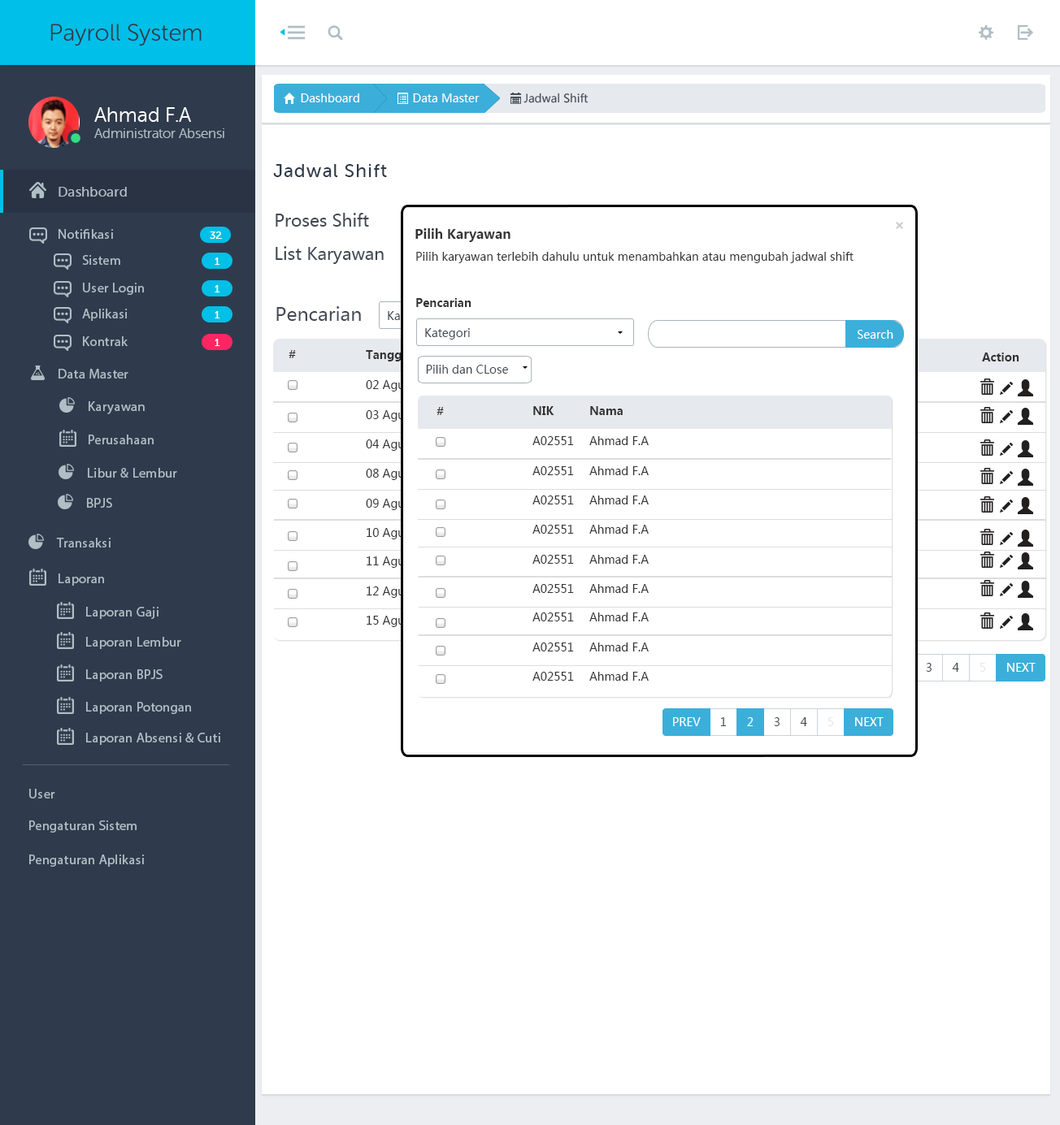
<style>
.page{position:relative;width:1060px;height:1125px;background:#ffffff}
.page>*{position:absolute;margin:0}
.t1{font:23.7px "MuseoSansRounded-300";color:#2f3b4c}
.t2{font:11.4px "MicrosoftYaHei";color:#ffffff}
.t3{font:11.2px "MicrosoftYaHei";color:#434a54}
.t4{font:13.5px "MuseoSansRounded-300";color:#b0bec5}
.t5{font:20.3px "MuseoSansRounded-300";color:#ffffff}
.t6{font:18.6px "MuseoSans-500";letter-spacing:0.04em;color:#2f3b4c}
.t7{font:13.5px "MuseoSans-500";letter-spacing:0.02em;color:#b0bec5}
.t8{font:16.9px "MicrosoftYaHei";color:#434a54}
.t9{font:13.5px "MyriadPro-Regular";letter-spacing:0.02em;color:#b0bec5}
.t10{font:10.2px "MuseoSans-500";letter-spacing:0.02em;color:#ffffff}
.t11{font:13px "MicrosoftYaHei-Bold";color:#333333}
.t12{font:11.4px "MicrosoftYaHei";color:#333333}
.t13{font:11.4px "MicrosoftYaHei-Bold";color:#333333}
.t14{font:18.6px "MicrosoftYaHei";color:#434a54}
.t15{font:11.4px "MicrosoftYaHei"}
.t16{font:11.4px "MicrosoftYaHei";color:#434a54}
.t17{font:11.4px "MicrosoftYaHei";color:#e6e9ed}
</style>
<div class="page">
<p class="t1" style="left:50px;top:24px;width:152px;height:22px">Payroll System</p>
<p class="t2" style="left:301px;top:93px;width:58px;height:9px">Dashboard</p>
<p class="t2" style="left:413px;top:93px;width:66px;height:9px">Data Master</p>
<p class="t3" style="left:523px;top:93px;width:65px;height:10px">Jadwal Shift</p>
<p class="t4" style="left:94px;top:107px;width:130px;height:31px"><span class="t5">Ahmad F.A <br></span>Administrator Absensi</p>
<p class="t6" style="left:273px;top:164px;width:114px;height:13px">Jadwal Shift</p>
<p class="t7" style="left:59px;top:187px;width:68px;height:10px">Dashboard</p>
<p class="t8" style="left:275px;top:213px;width:94px;height:14px">Proses Shift</p>
<p class="t9" style="left:59px;top:229px;width:54px;height:10px">Notifikasi</p>
<p class="t10" style="left:210px;top:232px;width:12px;height:7px">32</p>
<p class="t11" style="left:415px;top:228px;width:95px;height:14px">Pilih Karyawan</p>
<p class="t9" style="left:82px;top:255px;width:38px;height:10px">Sistem</p>
<p class="t10" style="left:215px;top:258px;width:5px;height:7px">1</p>
<p class="t8" style="left:275px;top:246px;width:109px;height:18px">List Karyawan</p>
<p class="t12" style="left:416px;top:252px;width:437px;height:11px">Pilih karyawan terlebih dahulu untuk menambahkan atau mengubah jadwal shift</p>
<p class="t9" style="left:83px;top:283px;width:61px;height:12px">User Login</p>
<p class="t10" style="left:215px;top:285px;width:5px;height:8px">1</p>
<p class="t13" style="left:416px;top:298px;width:55px;height:9px">Pencarian</p>
<p class="t9" style="left:82px;top:309px;width:46px;height:12px">Aplikasi</p>
<p class="t10" style="left:215px;top:311px;width:5px;height:8px">1</p>
<p class="t14" style="left:276px;top:306px;width:85px;height:15px">Pencarian</p>
<p class="t15" style="left:388px;top:311px;width:44px;height:12px">Kategori</p>
<p class="t16" style="left:425px;top:328px;width:45px;height:12px">Kategori</p>
<p class="t2" style="left:857px;top:330px;width:36px;height:9px">Search</p>
<p class="t9" style="left:83px;top:336px;width:45px;height:10px">Kontrak</p>
<p class="t10" style="left:215px;top:339px;width:5px;height:7px">1</p>
<p class="t13" style="left:288px;top:350px;width:8px;height:8px">#</p>
<p class="t13" style="left:366px;top:350px;width:45px;height:12px">Tanggal</p>
<p class="t13" style="left:982px;top:353px;width:37px;height:9px">Action</p>
<p class="t16" style="left:426px;top:365px;width:82px;height:9px">Pilih dan CLose</p>
<p class="t9" style="left:59px;top:369px;width:69px;height:10px">Data Master</p>
<p class="t15" style="left:366px;top:380px;width:91px;height:12px">02 Agustus 2016</p>
<p class="t9" style="left:89px;top:401px;width:56px;height:13px">Karyawan</p>
<p class="t15" style="left:366px;top:410px;width:91px;height:12px">03 Agustus 2016</p>
<p class="t13" style="left:436px;top:407px;width:8px;height:8px">#</p>
<p class="t13" style="left:533px;top:406px;width:21px;height:9px">NIK</p>
<p class="t13" style="left:590px;top:406px;width:32px;height:9px">Nama</p>
<p class="t9" style="left:89px;top:435px;width:65px;height:9px">Perusahaan</p>
<p class="t12" style="left:532px;top:436px;width:42px;height:9px">A02551</p>
<p class="t12" style="left:589px;top:436px;width:59px;height:9px">Ahmad F.A</p>
<p class="t15" style="left:366px;top:440px;width:91px;height:11px">04 Agustus 2016</p>
<p class="t9" style="left:88px;top:468px;width:89px;height:10px">Libur &amp; Lembur</p>
<p class="t15" style="left:366px;top:469px;width:91px;height:11px">08 Agustus 2016</p>
<p class="t12" style="left:532px;top:466px;width:42px;height:9px">A02551</p>
<p class="t12" style="left:589px;top:466px;width:59px;height:9px">Ahmad F.A</p>
<p class="t12" style="left:532px;top:496px;width:42px;height:9px">A02551</p>
<p class="t12" style="left:589px;top:496px;width:59px;height:9px">Ahmad F.A</p>
<p class="t9" style="left:87px;top:498px;width:25px;height:10px">BPJS</p>
<p class="t15" style="left:366px;top:499px;width:91px;height:11px">09 Agustus 2016</p>
<p class="t15" style="left:366px;top:528px;width:91px;height:12px">10 Agustus 2016</p>
<p class="t12" style="left:532px;top:525px;width:42px;height:9px">A02551</p>
<p class="t12" style="left:589px;top:525px;width:59px;height:9px">Ahmad F.A</p>
<p class="t9" style="left:56px;top:538px;width:55px;height:10px">Transaksi</p>
<p class="t15" style="left:366px;top:557px;width:91px;height:11px">11 Agustus 2016</p>
<p class="t12" style="left:532px;top:555px;width:42px;height:9px">A02551</p>
<p class="t12" style="left:589px;top:555px;width:59px;height:9px">Ahmad F.A</p>
<p class="t9" style="left:59px;top:574px;width:45px;height:12px">Laporan</p>
<p class="t15" style="left:366px;top:587px;width:91px;height:11px">12 Agustus 2016</p>
<p class="t12" style="left:532px;top:584px;width:42px;height:9px">A02551</p>
<p class="t12" style="left:589px;top:584px;width:59px;height:9px">Ahmad F.A</p>
<p class="t9" style="left:86px;top:607px;width:72px;height:12px">Laporan Gaji</p>
<p class="t15" style="left:366px;top:616px;width:91px;height:11px">15 Agustus 2016</p>
<p class="t12" style="left:532px;top:613px;width:42px;height:9px">A02551</p>
<p class="t12" style="left:589px;top:613px;width:59px;height:9px">Ahmad F.A</p>
<p class="t9" style="left:86px;top:637px;width:95px;height:12px">Laporan Lembur</p>
<p class="t12" style="left:532px;top:643px;width:42px;height:9px">A02551</p>
<p class="t12" style="left:589px;top:643px;width:59px;height:9px">Ahmad F.A</p>
<p class="t16" style="left:926px;top:663px;width:5px;height:9px">3</p>
<p class="t16" style="left:952px;top:663px;width:7px;height:9px">4</p>
<p class="t17" style="left:979px;top:663px;width:6px;height:9px">5</p>
<p class="t2" style="left:1007px;top:663px;width:28px;height:9px">NEXT</p>
<p class="t9" style="left:86px;top:670px;width:77px;height:12px">Laporan BPJS</p>
<p class="t12" style="left:532px;top:672px;width:42px;height:9px">A02551</p>
<p class="t12" style="left:589px;top:672px;width:59px;height:9px">Ahmad F.A</p>
<p class="t9" style="left:86px;top:702px;width:105px;height:12px">Laporan Potongan</p>
<p class="t2" style="left:673px;top:717px;width:27px;height:9px">PREV</p>
<p class="t16" style="left:720px;top:717px;width:6px;height:9px">1</p>
<p class="t2" style="left:747px;top:717px;width:6px;height:9px">2</p>
<p class="t16" style="left:774px;top:717px;width:5px;height:9px">3</p>
<p class="t16" style="left:800px;top:717px;width:7px;height:9px">4</p>
<p class="t17" style="left:827px;top:717px;width:6px;height:9px">5</p>
<p class="t2" style="left:855px;top:717px;width:28px;height:9px">NEXT</p>
<p class="t9" style="left:86px;top:733px;width:134px;height:12px">Laporan Absensi &amp; Cuti</p>
<p class="t9" style="left:29px;top:789px;width:26px;height:10px">User</p>
<p class="t9" style="left:29px;top:821px;width:108px;height:12px">Pengaturan Sistem</p>
<p class="t9" style="left:29px;top:855px;width:115px;height:12px">Pengaturan Aplikasi</p>
</div>
